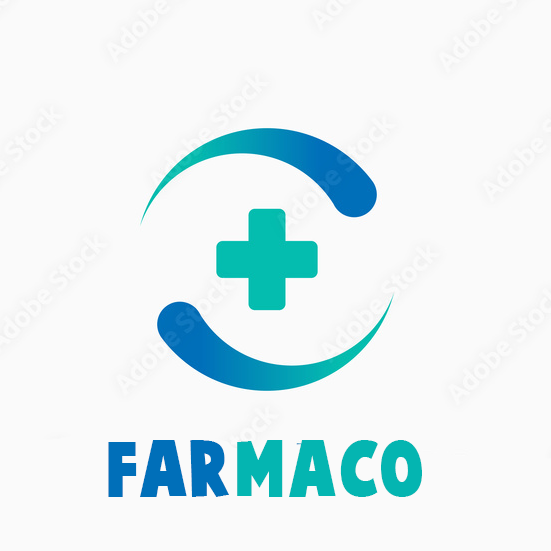
<style>
.page{position:relative;width:551px;height:551px;background:#fafafa}
.page>*{position:absolute;margin:0}
.t1{font:70.9px "CartoonistKooky";letter-spacing:0.025em;color:#04b5b1}
.t2{font:70.9px "CartoonistKooky";letter-spacing:0.025em;color:#006fb9}
</style>
<div class="page">
<p class="t1" style="left:108px;top:440px;width:314px;height:57px"><span class="t2">Far</span>maco</p>
</div>
